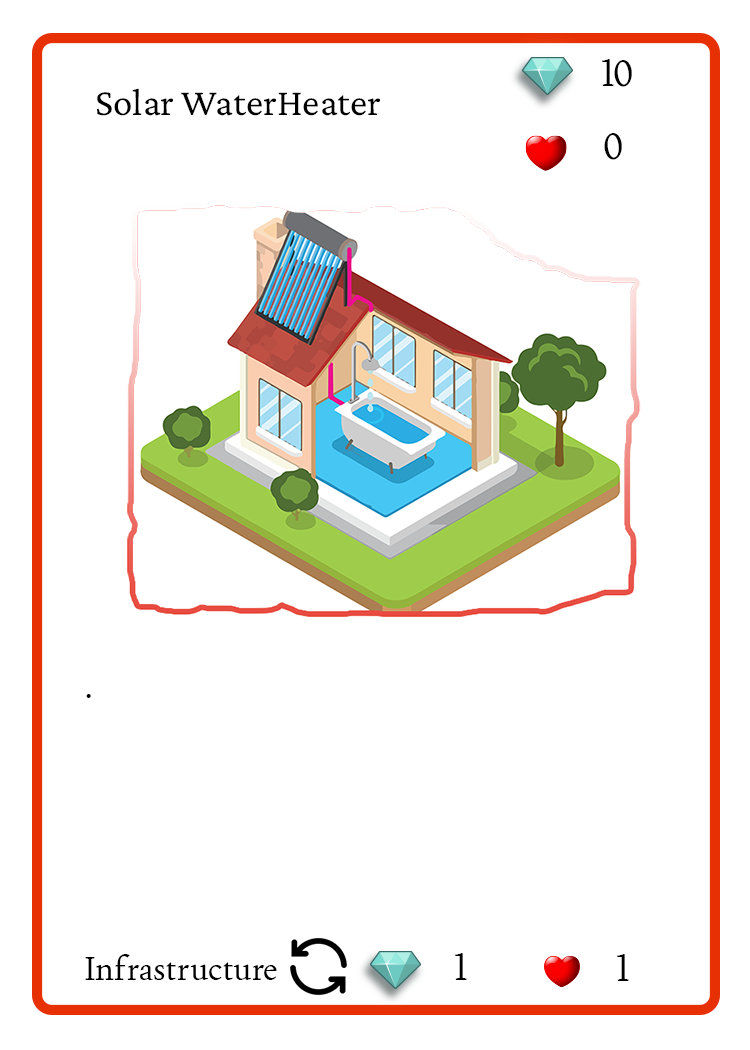
<style>
.page{position:relative;width:750px;height:1050px;background:#ffffff}
.page>*{position:absolute;margin:0}
.t1{font:37.5px "Joan-Regular";color:#000000;text-transform:uppercase}
.t2{font:38.9px "CrimsonPro-Regular";color:#000000}
.t3{font:33.3px "Joan-Regular";color:#000000}
</style>
<div class="page">
<p class="t1" style="left:602px;top:59px;width:30px;height:28px">10</p>
<p class="t2" style="left:97px;top:88px;width:283px;height:28px">Solar WaterHeater</p>
<p class="t1" style="left:604px;top:133px;width:18px;height:27px">0</p>
<p class="t3" style="left:86px;top:694px;width:5px;height:4px">.</p>
<p class="t1" style="left:455px;top:953px;width:12px;height:27px">1</p>
<p class="t3" style="left:85px;top:954px;width:192px;height:26px">Infrastructure</p>
<p class="t1" style="left:617px;top:954px;width:12px;height:27px">1</p>
</div>
